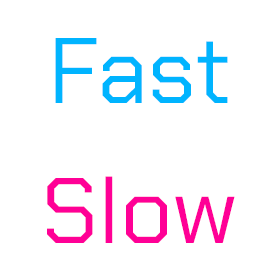
<style>
.page{position:relative;width:280px;height:280px;background:#ffffff}
.page>*{position:absolute;margin:0}
.t1{font:93px "ChakraPetch-Regular";color:#00b4ff}
.t2{font:93px "ChakraPetch-Regular";color:#ff0096}
</style>
<div class="page">
<p class="t1" style="left:55px;top:38px;width:173px;height:65px">Fast</p>
<p class="t2" style="left:47px;top:176px;width:188px;height:67px">Slow</p>
</div>
